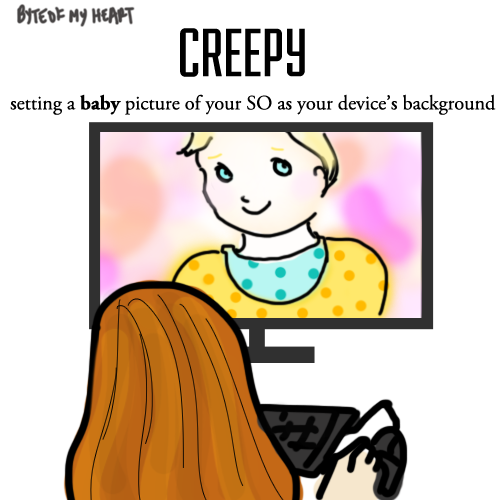
<style>
.page{position:relative;width:500px;height:500px;background:#ffffff}
.page>*{position:absolute;margin:0}
.t1{font:72px "Fairview-Regular";color:#000000}
.t2{font:20.2px "AGaramondPro-Regular";color:#000000}
.t3{font:20.2px "AGaramondPro-Bold";color:#000000}
</style>
<div class="page">
<p class="t1" style="left:180px;top:28px;width:125px;height:49px">CREEPY</p>
<p class="t2" style="left:10px;top:94px;width:486px;height:21px">setting a <span class="t3">baby </span>picture of your SO as your device’s background</p>
</div>
